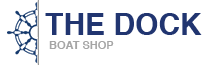
<style>
.page{position:relative;width:213px;height:65px;background:#ffffff}
.page>*{position:absolute;margin:0}
.t1{font:30px "Helvetica-Bold";color:#213570}
.t2{font:11px "Helvetica-Bold";color:#a5a5a5}
</style>
<div class="page">
<p class="t1" style="left:45px;top:13px;width:157px;height:22px">THE DOCK</p>
<p class="t2" style="left:49px;top:41px;width:65px;height:8px">BOAT SHOP</p>
</div>
